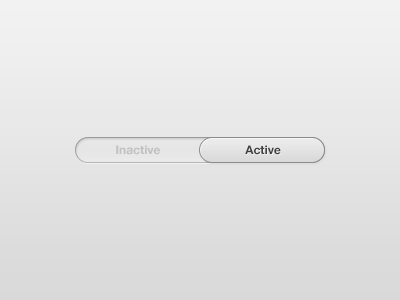
<style>
.page{position:relative;width:400px;height:300px}
.page>*{position:absolute;margin:0}
.t1{font:12px "HelveticaNeue-Bold";color:#c0c0c0}
.t2{font:12px "HelveticaNeue-Bold";color:#404040}
</style>
<div class="page">
<p class="t1" style="left:116px;top:145px;width:44px;height:10px">Inactive</p>
<p class="t2" style="left:245px;top:145px;width:36px;height:10px">Active</p>
</div>
